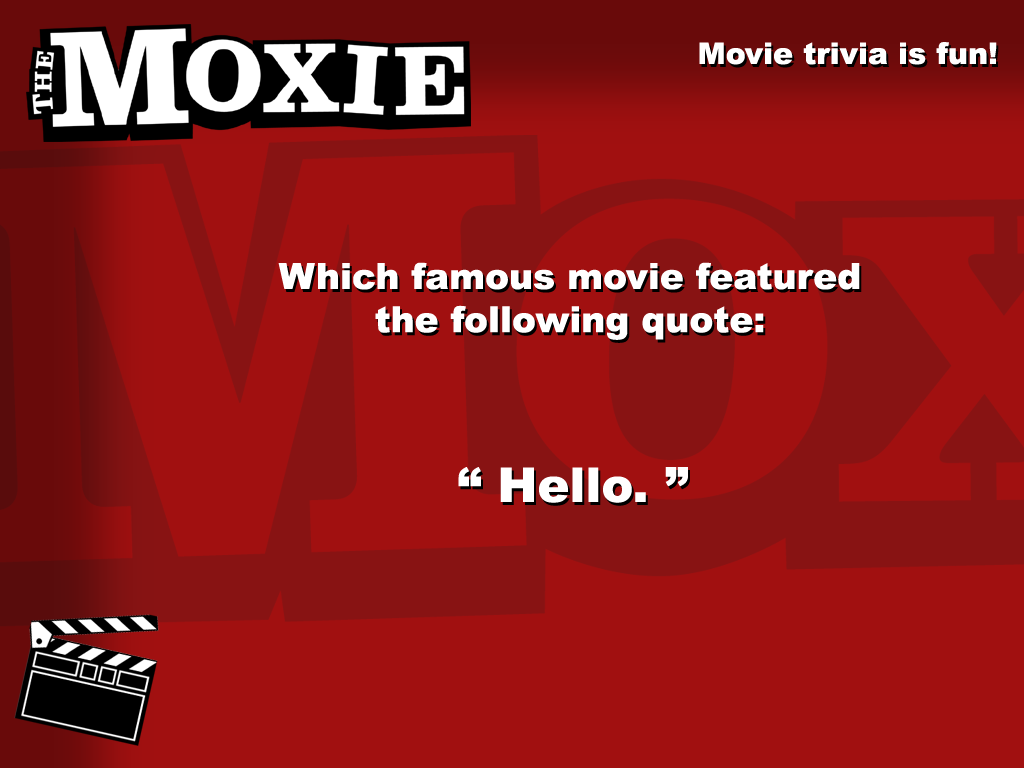
<style>
.page{position:relative;width:1024px;height:768px;background:#a11010}
.page>*{position:absolute;margin:0}
.t1{font:30px "Arial-Black";color:#ffffff}
.t2{font:36px "Arial-Black";color:#ffffff}
.t3{font:48px "Arial-Black";color:#ffffff}
</style>
<div class="page">
<p class="t1" style="left:699px;top:42px;width:298px;height:23px">Movie trivia is fun!</p>
<p class="t2" style="left:278px;top:262px;width:582px;height:78px;text-align:center">Which famous movie featured<br>the following quote:</p>
<p class="t3" style="left:458px;top:467px;width:230px;height:36px">“ Hello. ”</p>
</div>
